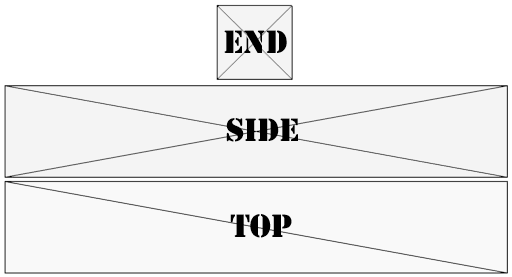
<style>
.page{position:relative;width:512px;height:277px;background:#ffffff}
.page>*{position:absolute;margin:0}
.t1{font:30px "StencilStd";color:#000000}
</style>
<div class="page">
<p class="t1" style="left:224px;top:30px;width:63px;height:23px">end</p>
<p class="t1" style="left:226px;top:118px;width:72px;height:24px">SIDE</p>
<p class="t1" style="left:230px;top:214px;width:62px;height:24px">TOP</p>
</div>
